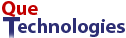
<style>
.page{position:relative;width:126px;height:38px;background:#ffffff}
.page>*{position:absolute;margin:0}
.t1{font:20px "MyriadPro-Bold";color:#c20000}
.t2{font:20px "MyriadPro-Bold";color:#2d2e74}
</style>
<div class="page">
<p class="t1" style="left:2px;top:1px;width:36px;height:16px">Que</p>
<p class="t2" style="left:18px;top:18px;width:107px;height:19px">echnologies</p>
</div>
